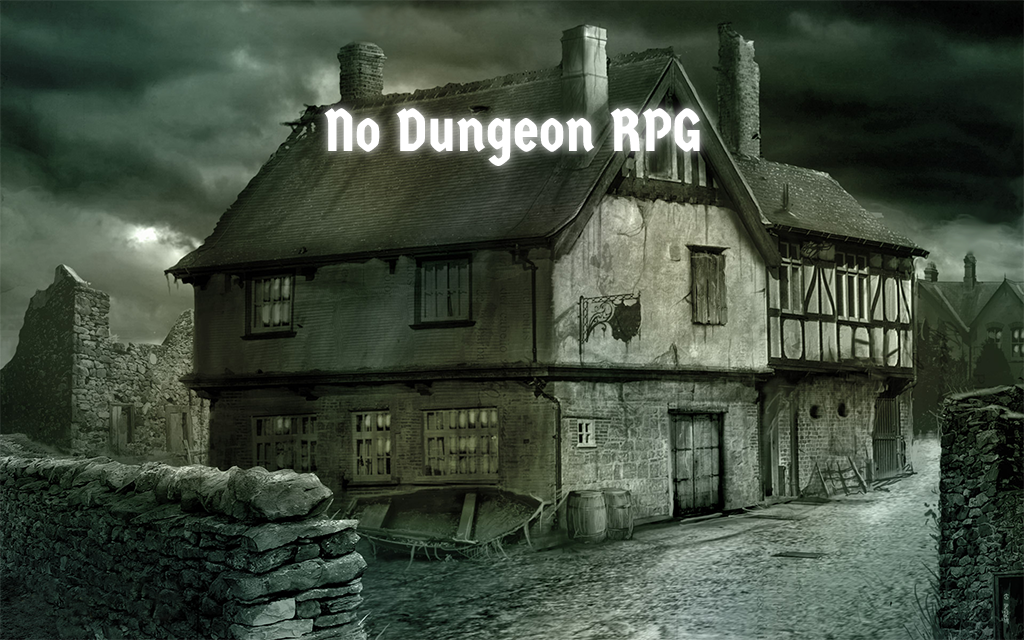
<style>
.page{position:relative;width:1024px;height:640px}
.page>*{position:absolute;margin:0}
.t1{font:60px "GermaniaOne-Regular";color:#ffffff}
</style>
<div class="page">
<p class="t1" style="left:324px;top:108px;width:376px;height:58px">No Dungeon RPG</p>
</div>
